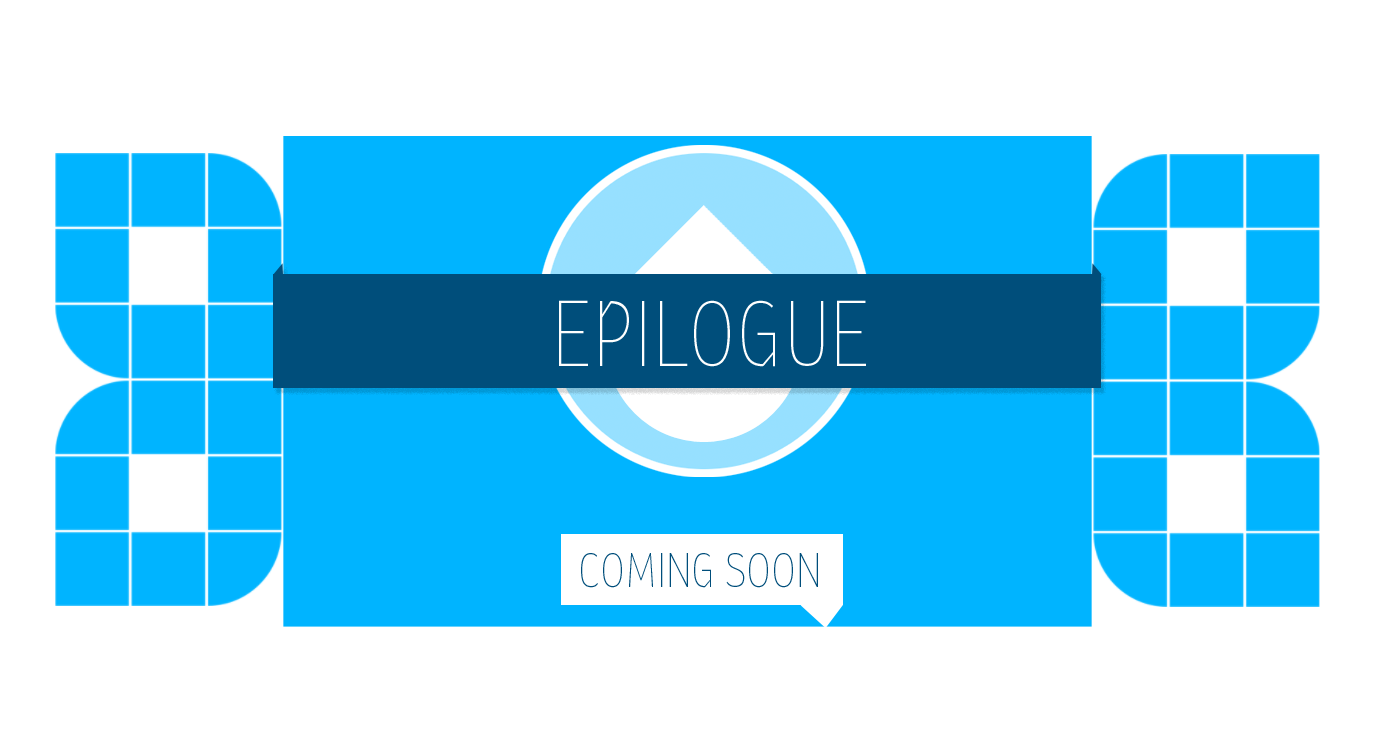
<style>
.page{position:relative;width:1391px;height:752px;background:#ffffff}
.page>*{position:absolute;margin:0}
.t1{font:93.1px "StTransmission-100CondensedThin";color:#fefefe}
.t2{font:48.2px "StTransmission-100CondensedThin";color:#004e7b}
</style>
<div class="page">
<p class="t1" style="left:559px;top:300px;width:307px;height:67px">EPILOGUE</p>
<p class="t2" style="left:581px;top:553px;width:237px;height:35px">COMING SOON</p>
</div>
